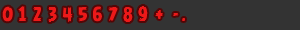
<style>
.page{position:relative;width:300px;height:30px;background:#333333}
.page>*{position:absolute;margin:0}
.t1{font:18px "AngryBirds-Bold";color:#ec1919;scale:1.05 1}
.t2{font:18px "AngryBirds-Bold";color:#ec1919;scale:1.08 1}
.t3{font:18px "AngryBirds-Bold";color:#ec1919;scale:1.09 1}
.t4{font:18px "AngryBirds-Bold";color:#ec1919}
.t5{font:18px "AngryBirds-Bold";color:#ec1919;scale:1.07 1}
.t6{font:18px "AngryBirds-Bold";color:#ec1919;scale:1.17 1}
.t7{font:18px "AngryBirds-Bold";color:#ec1919;scale:1.14 1}
</style>
<div class="page">
<p class="t1" style="left:2px;top:6px;width:11px;height:16px">0</p>
<p class="t2" style="left:18px;top:6px;width:9px;height:15px">1</p>
<p class="t3" style="left:93px;top:6px;width:9px;height:16px">6</p>
<p class="t4" style="left:138px;top:6px;width:10px;height:15px">9</p>
<p class="t4" style="left:33px;top:7px;width:8px;height:14px">2</p>
<p class="t4" style="left:48px;top:7px;width:9px;height:15px">3</p>
<p class="t5" style="left:62px;top:7px;width:11px;height:15px">4</p>
<p class="t6" style="left:78px;top:7px;width:9px;height:15px">5</p>
<p class="t7" style="left:108px;top:7px;width:10px;height:14px">7</p>
<p class="t4" style="left:123px;top:7px;width:10px;height:15px">8</p>
<p class="t4" style="left:155px;top:10px;width:8px;height:9px">+</p>
<p class="t3" style="left:173px;top:13px;width:6px;height:3px">-</p>
<p class="t4" style="left:182px;top:18px;width:3px;height:3px">.</p>
</div>
